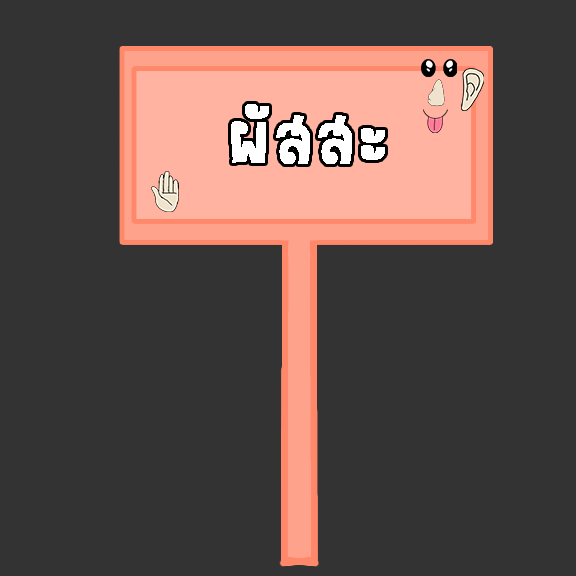
<style>
.page{position:relative;width:576px;height:576px;background:#333333}
.page>*{position:absolute;margin:0}
.t1{font:100px "2005_iannnnnGMO";color:#ffffff;font-weight:bold}
</style>
<div class="page">
<p class="t1" style="left:231px;top:104px;width:154px;height:60px">ผัสสะ</p>
</div>
